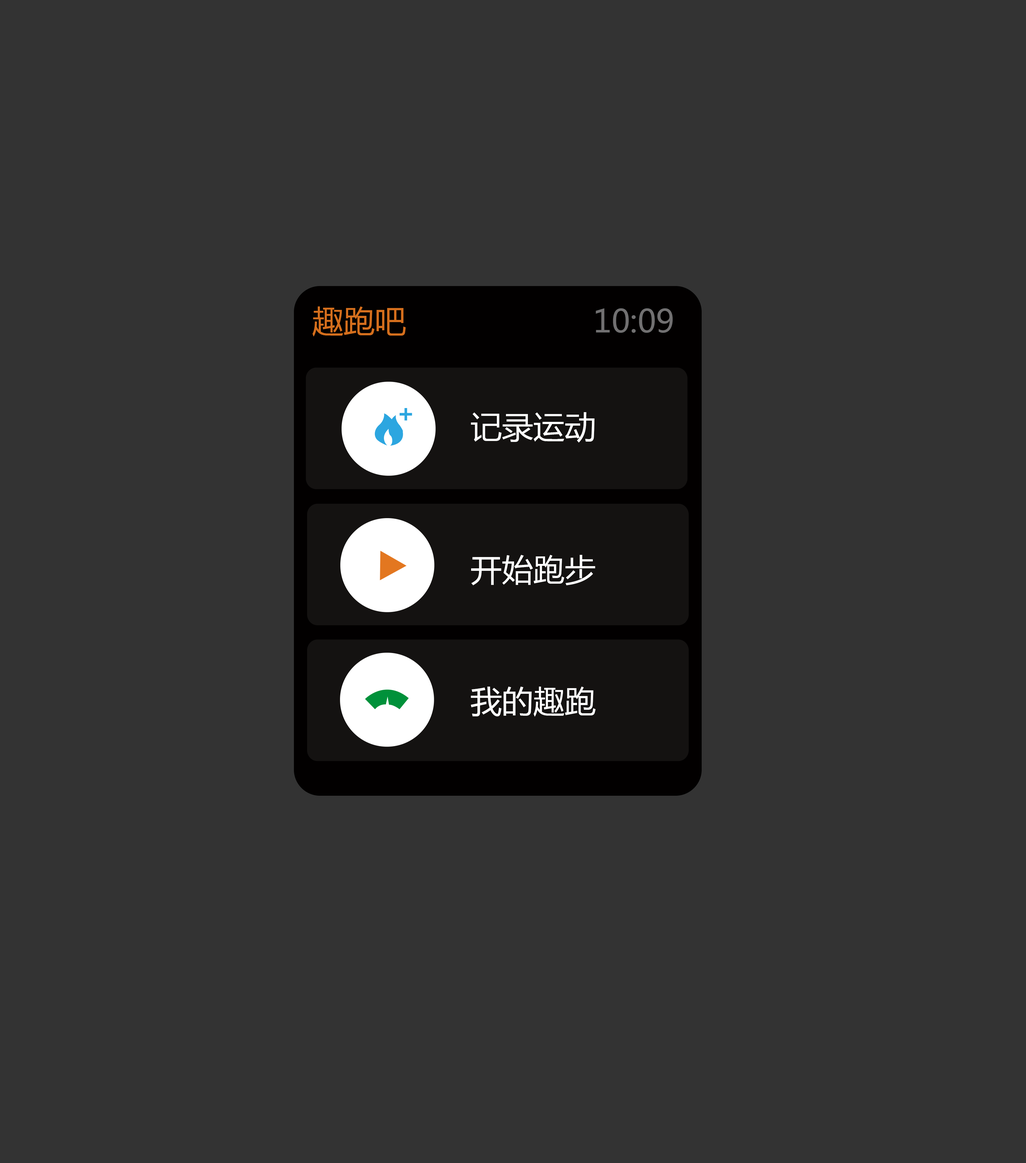
<style>
.page{position:relative;width:1026px;height:1163px;background:#333333}
.page>*{position:absolute;margin:0}
.t1{font:31.4px "MicrosoftYaHei";color:#e37720}
.t2{font:31.4px "MicrosoftYaHei";color:#717071}
.t3{font:31.4px "MicrosoftYaHei";color:#ffffff}
</style>
<div class="page">
<p class="t1" style="left:312px;top:306px;width:94px;height:30px;opacity:0.9">趣跑吧</p>
<p class="t2" style="left:595px;top:308px;width:78px;height:25px">10:09</p>
<p class="t3" style="left:471px;top:412px;width:123px;height:30px">记录运动</p>
<p class="t3" style="left:471px;top:555px;width:124px;height:30px">开始跑步</p>
<p class="t3" style="left:471px;top:686px;width:124px;height:30px">我的趣跑</p>
</div>
